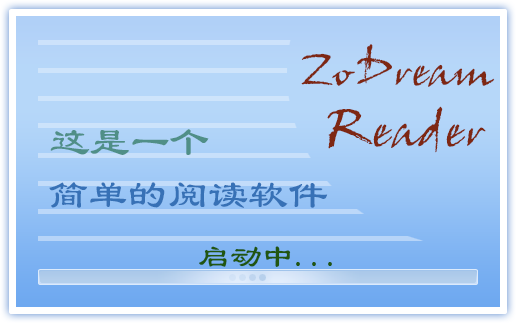
<style>
.page{position:relative;width:516px;height:323px}
.page>*{position:absolute;margin:0}
.t1{font:48px "JohnHandyLetPlain";color:#7e2713}
.t2{font:53.3px "JohnHandyLetPlain";color:#7e2713}
.t3{font:40px "LiSu";color:#508f87}
.t4{font:40px "LiSu";color:#3771b6}
.t5{font:32px "LiSu";color:#215611}
</style>
<div class="page">
<p class="t1" style="left:301px;top:44px;width:194px;height:43px">ZoDream</p>
<p class="t2" style="left:327px;top:106px;width:159px;height:47px">Reader</p>
<p class="t3" style="left:50px;top:129px;width:159px;height:26px">这是一个</p>
<p class="t4" style="left:49px;top:182px;width:279px;height:26px">简单的阅读软件</p>
<p class="t5" style="left:199px;top:246px;width:133px;height:21px">启动中...</p>
</div>
